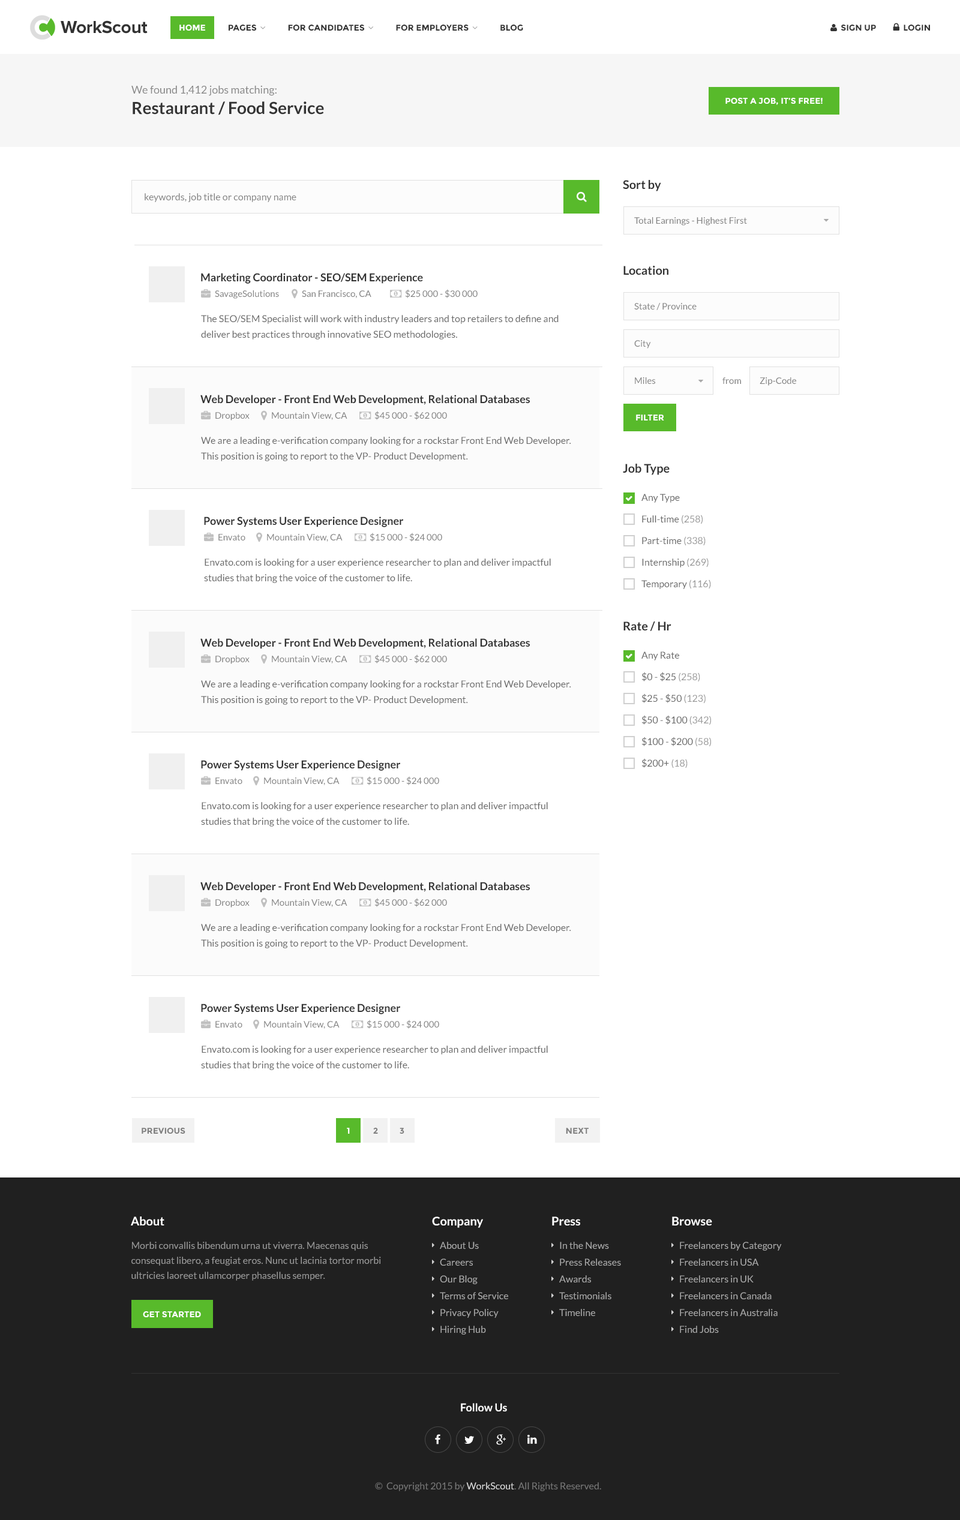
<style>
.page{position:relative;width:960px;height:1520px;background:#ffffff}
.page>*{position:absolute;margin:0}
.t1{font:18px "ProximaNova-Bold";letter-spacing:-0.015em;color:#323232}
.t2{font:10.8px/20.4px "Lato-Regular";color:#888888}
.t3{font:16.8px/20.4px "Lato-Bold";color:#333333}
.t4{font:8.4px "Montserrat-Bold";color:#ffffff;text-transform:uppercase}
.t5{font:12px "Lato-Bold";color:#333333}
.t6{font:9.6px "Lato-Regular";color:#808080}
.t7{font:9px "Lato-Regular";color:#808080}
.t8{font:10.8px "Lato-Bold";color:#333333}
.t9{font:9.6px/15.6px "Lato-Regular";color:#666666}
.t10{font:9.6px/21.6px "Lato-Regular";color:#666666}
.t11{font:9.6px/21.6px "Lato-Regular";color:#999999}
.t12{font:8.4px "Montserrat-Bold";color:#808080;text-transform:uppercase}
.t13{font:8.4px "Montserrat-Bold";color:#ffffff}
.t14{font:8.4px "Montserrat-Bold";color:#808080}
.t15{font:12px "Lato-Bold";color:#ffffff}
.t16{font:9.6px/15px "Lato-Regular";color:#999999}
.t17{font:9.6px/16.8px "Lato-Regular";color:#aaaaaa}
.t18{font:10.8px "Lato-Bold";color:#ffffff}
.t19{font:9.6px "Lato-Regular";color:#777777}
.t20{font:9.6px "Lato-Regular";color:#dddddd}
</style>
<div class="page">
<p class="t1" style="left:61px;top:20px;width:87px;height:14px">WorkScout</p>
<p class="t2" style="left:131px;top:85px;width:193px;height:30px">We found 1,412 jobs matching:<br><span class="t3">Restaurant / Food Service</span></p>
<p class="t4" style="left:725px;top:98px;width:98px;height:7px">Post a Job, It’s Free!</p>
<p class="t5" style="left:623px;top:180px;width:38px;height:11px">Sort by</p>
<p class="t6" style="left:145px;top:193px;width:151px;height:9px">keywords, job title or company name</p>
<p class="t7" style="left:634px;top:217px;width:113px;height:9px">Total Earnings - Highest First</p>
<p class="t5" style="left:623px;top:266px;width:45px;height:9px">Location</p>
<p class="t8" style="left:201px;top:273px;width:222px;height:11px">Marketing Coordinator - SEO/SEM Experience</p>
<p class="t7" style="left:215px;top:290px;width:64px;height:9px">SavageSolutions</p>
<p class="t7" style="left:302px;top:290px;width:69px;height:8px">San Francisco, CA</p>
<p class="t7" style="left:405px;top:289px;width:73px;height:9px">$25 000 - $30 000</p>
<p class="t7" style="left:634px;top:303px;width:63px;height:7px">State / Province</p>
<p class="t9" style="left:201px;top:315px;width:358px;height:25px">The SEO/SEM Specialist will work with industry leaders and top retailers to define and<br>deliver best practices through innovative SEO methodologies.</p>
<p class="t7" style="left:634px;top:340px;width:17px;height:9px">City</p>
<p class="t7" style="left:635px;top:377px;width:20px;height:7px">Miles</p>
<p class="t7" style="left:722px;top:377px;width:19px;height:7px">from</p>
<p class="t7" style="left:760px;top:377px;width:36px;height:9px">Zip-Code</p>
<p class="t8" style="left:200px;top:395px;width:330px;height:11px">Web Developer - Front End Web Development, Relational Databases</p>
<p class="t7" style="left:215px;top:412px;width:35px;height:9px">Dropbox</p>
<p class="t7" style="left:272px;top:412px;width:75px;height:8px">Mountain View, CA</p>
<p class="t7" style="left:374px;top:411px;width:73px;height:9px">$45 000 - $62 000</p>
<p class="t4" style="left:636px;top:415px;width:28px;height:6px">Filter</p>
<p class="t9" style="left:201px;top:437px;width:370px;height:24px">We are a leading e-verification company looking for a rockstar Front End Web Developer.<br>This position is going to report to the VP- Product Development.</p>
<p class="t5" style="left:623px;top:464px;width:47px;height:11px">Job Type</p>
<p class="t10" style="left:641px;top:494px;width:70px;height:95px">Any Type<br>Full-time <span class="t11">(258)<br></span>Part-time <span class="t11">(338)<br></span>Internship <span class="t11">(269)<br></span>Temporary <span class="t11">(116)</span></p>
<p class="t8" style="left:204px;top:517px;width:199px;height:10px">Power Systems User Experience Designer</p>
<p class="t7" style="left:218px;top:534px;width:27px;height:7px">Envato</p>
<p class="t7" style="left:267px;top:534px;width:76px;height:8px">Mountain View, CA</p>
<p class="t7" style="left:370px;top:533px;width:72px;height:9px">$15 000 - $24 000</p>
<p class="t9" style="left:204px;top:559px;width:347px;height:24px">Envato.com is looking for a user experience researcher to plan and deliver impactful<br>studies that bring the voice of the customer to life.</p>
<p class="t5" style="left:623px;top:622px;width:48px;height:9px">Rate / Hr</p>
<p class="t8" style="left:200px;top:638px;width:330px;height:11px">Web Developer - Front End Web Development, Relational Databases</p>
<p class="t10" style="left:641px;top:652px;width:70px;height:117px">Any Rate<br>$0 - $25 <span class="t11">(258)<br></span>$25 - $50 <span class="t11">(123)<br></span>$50 - $100 <span class="t11">(342)<br></span>$100 - $200 <span class="t11">(58)<br></span>$200+ <span class="t11">(18)</span></p>
<p class="t7" style="left:215px;top:656px;width:35px;height:8px">Dropbox</p>
<p class="t7" style="left:272px;top:656px;width:75px;height:8px">Mountain View, CA</p>
<p class="t7" style="left:374px;top:655px;width:73px;height:9px">$45 000 - $62 000</p>
<p class="t9" style="left:201px;top:680px;width:370px;height:25px">We are a leading e-verification company looking for a rockstar Front End Web Developer.<br>This position is going to report to the VP- Product Development.</p>
<p class="t8" style="left:201px;top:760px;width:199px;height:11px">Power Systems User Experience Designer</p>
<p class="t7" style="left:215px;top:778px;width:27px;height:6px">Envato</p>
<p class="t7" style="left:264px;top:778px;width:76px;height:7px">Mountain View, CA</p>
<p class="t7" style="left:367px;top:776px;width:72px;height:9px">$15 000 - $24 000</p>
<p class="t9" style="left:201px;top:802px;width:347px;height:25px">Envato.com is looking for a user experience researcher to plan and deliver impactful<br>studies that bring the voice of the customer to life.</p>
<p class="t8" style="left:200px;top:882px;width:330px;height:11px">Web Developer - Front End Web Development, Relational Databases</p>
<p class="t7" style="left:215px;top:899px;width:35px;height:9px">Dropbox</p>
<p class="t7" style="left:272px;top:899px;width:75px;height:8px">Mountain View, CA</p>
<p class="t7" style="left:374px;top:898px;width:73px;height:9px">$45 000 - $62 000</p>
<p class="t9" style="left:201px;top:924px;width:370px;height:25px">We are a leading e-verification company looking for a rockstar Front End Web Developer.<br>This position is going to report to the VP- Product Development.</p>
<p class="t8" style="left:201px;top:1004px;width:199px;height:11px">Power Systems User Experience Designer</p>
<p class="t7" style="left:215px;top:1021px;width:27px;height:7px">Envato</p>
<p class="t7" style="left:264px;top:1021px;width:76px;height:8px">Mountain View, CA</p>
<p class="t7" style="left:367px;top:1020px;width:72px;height:9px">$15 000 - $24 000</p>
<p class="t9" style="left:201px;top:1046px;width:347px;height:24px">Envato.com is looking for a user experience researcher to plan and deliver impactful<br>studies that bring the voice of the customer to life.</p>
<p class="t12" style="left:142px;top:1128px;width:43px;height:6px">Previous</p>
<p class="t13" style="left:347px;top:1128px;width:3px;height:6px">1</p>
<p class="t14" style="left:373px;top:1128px;width:5px;height:6px">2</p>
<p class="t14" style="left:400px;top:1128px;width:4px;height:6px">3</p>
<p class="t12" style="left:566px;top:1128px;width:23px;height:6px">Next</p>
<p class="t15" style="left:131px;top:1217px;width:33px;height:9px">About</p>
<p class="t15" style="left:432px;top:1217px;width:51px;height:11px">Company</p>
<p class="t15" style="left:552px;top:1217px;width:28px;height:9px">Press</p>
<p class="t15" style="left:672px;top:1217px;width:40px;height:9px">Browse</p>
<p class="t16" style="left:131px;top:1242px;width:250px;height:39px">Morbi convallis bibendum urna ut viverra. Maecenas quis <br>consequat libero, a feugiat eros. Nunc ut lacinia tortor morbi ultricies laoreet ullamcorper phasellus semper.</p>
<p class="t17" style="left:440px;top:1242px;width:68px;height:93px">About Us<br>Careers<br>Our Blog<br>Terms of Service<br>Privacy Policy<br>Hiring Hub</p>
<p class="t17" style="left:559px;top:1242px;width:62px;height:74px">In the News<br>Press Releases<br>Awards<br>Testimonials<br>Timeline</p>
<p class="t17" style="left:680px;top:1242px;width:102px;height:91px">Freelancers by Category<br>Freelancers in USA<br>Freelancers in UK<br>Freelancers in Canada<br>Freelancers in Australia<br>Find Jobs</p>
<p class="t4" style="left:143px;top:1312px;width:58px;height:6px">Get Started</p>
<p class="t18" style="left:461px;top:1403px;width:46px;height:9px">Follow Us</p>
<p class="t19" style="left:375px;top:1483px;width:226px;height:9px">©  Copyright 2015 by <span class="t20">WorkScout</span>. All Rights Reserved.</p>
</div>
